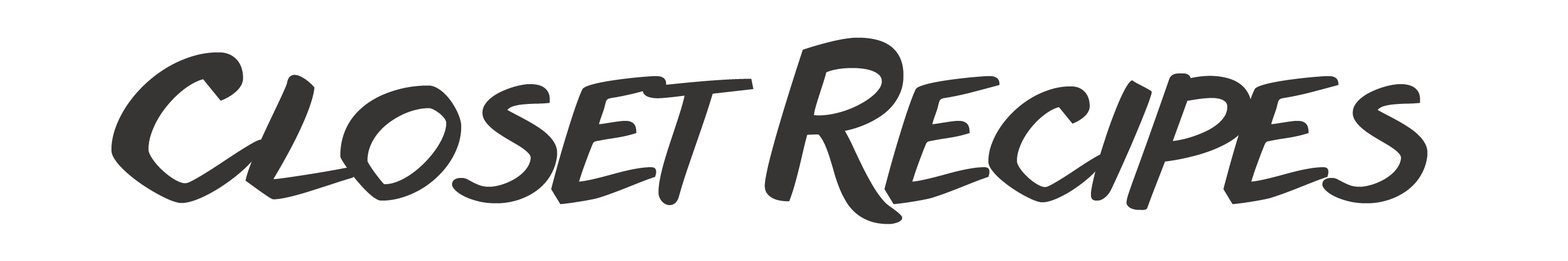
<style>
.page{position:relative;width:1568px;height:261px;background:#ffffff}
.page>*{position:absolute;margin:0}
.t1{font:157.2px "anothershabby";color:#373434;text-transform:uppercase}
.t2{font:204.3px "anothershabby";color:#373434;text-transform:uppercase}
</style>
<div class="page">
<p class="t1" style="left:111px;top:37px;width:1317px;height:188px"><span class="t2">c</span>loset<span class="t2"> r</span>ecipes</p>
</div>
